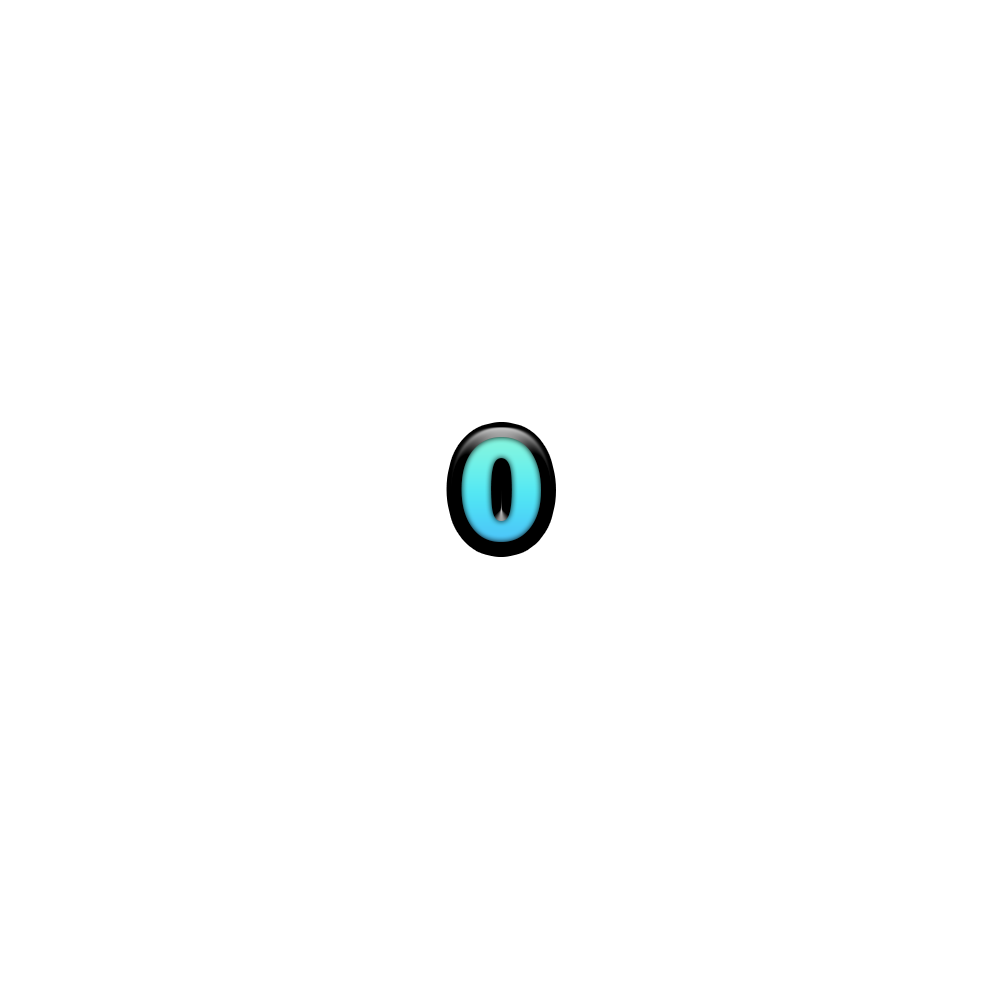
<style>
.page{position:relative;width:1000px;height:1000px;background:#ffffff}
.page>*{position:absolute;margin:0}
.t1{font:151.1px "FranklinGothic-Heavy";letter-spacing:-0.02em}
</style>
<div class="page">
<p class="t1" style="left:461px;top:437px;width:80px;height:105px">0</p>
</div>
